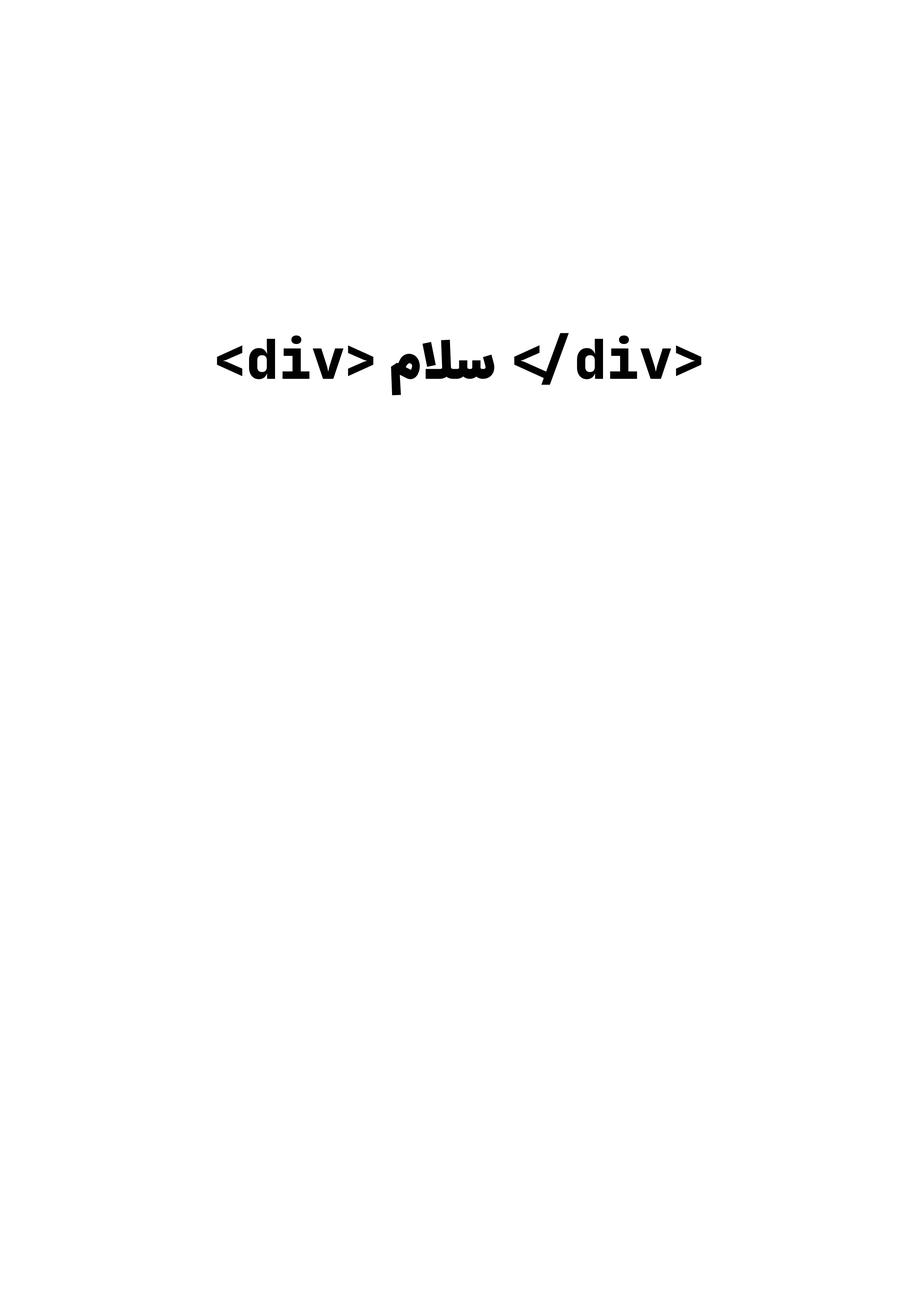
<style>
.page{position:relative;width:918px;height:1299px;background:#ffffff}
.page>*{position:absolute;margin:0}
.t1{font:54.7px "JetBrainsMono-ExtraBold";color:#010101}
.t2{font:54.7px "Dana-Black";color:#010101}
</style>
<div class="page">
<p class="t1" style="left:217px;top:333px;width:485px;height:62px">&lt;div&gt;<span class="t2"> سلام </span>&lt;/div&gt;</p>
</div>
